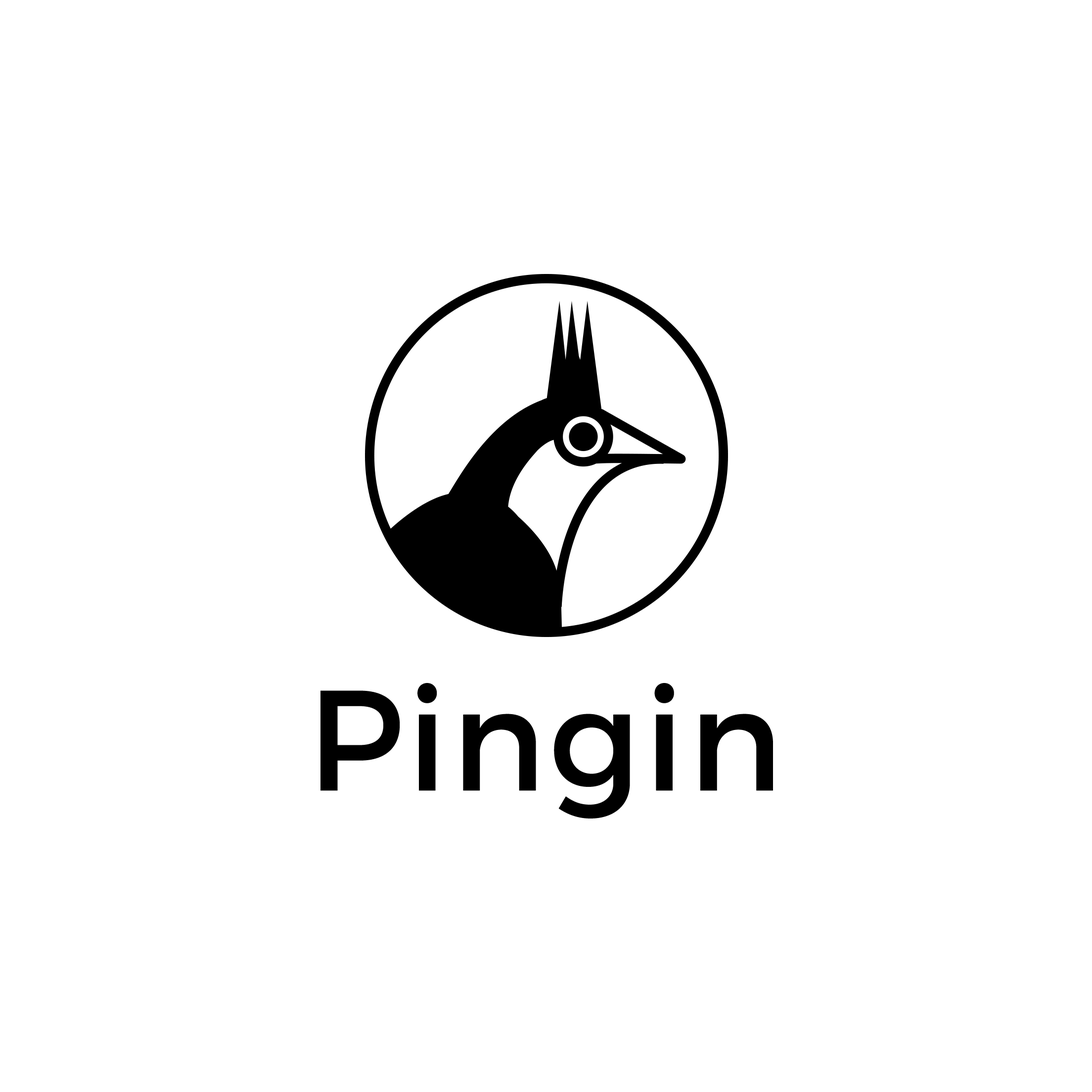
<style>
.page{position:relative;width:1092px;height:1092px;background:#ffffff}
.page>*{position:absolute;margin:0}
.t1{font:142.2px "Montserrat-Regular";color:#000000;font-weight:bold}
</style>
<div class="page">
<p class="t1" style="left:320px;top:683px;width:453px;height:135px">Pingin</p>
</div>
